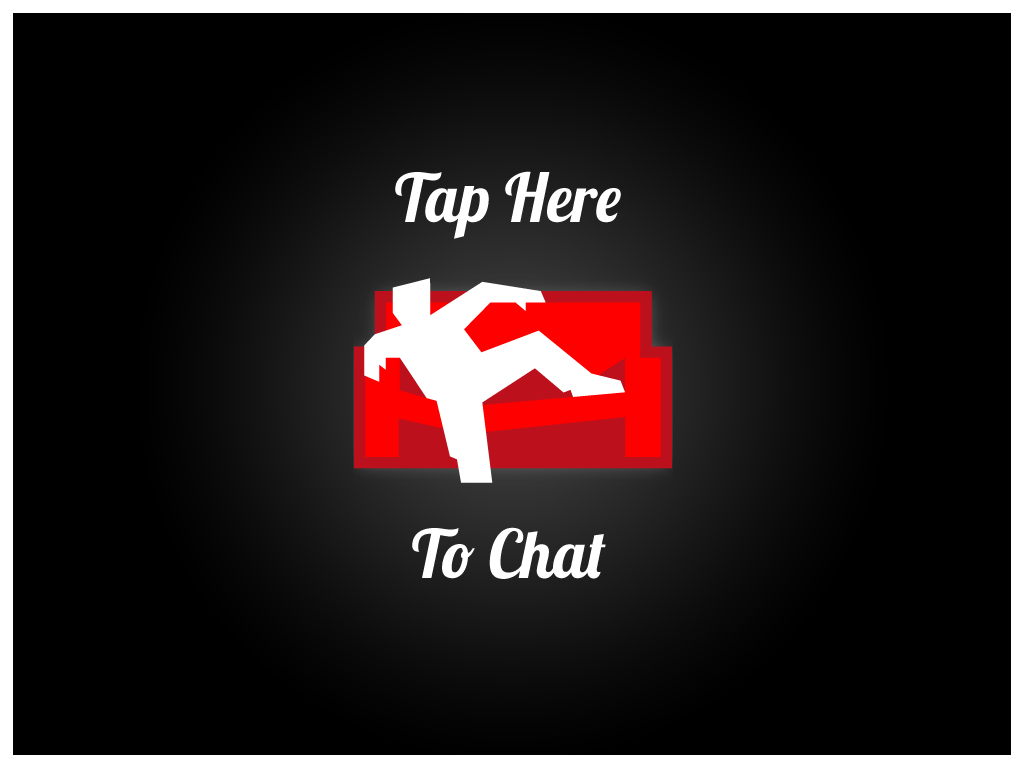
<style>
.page{position:relative;width:1024px;height:768px;background:#000000}
.page>*{position:absolute;margin:0}
.t1{font:66.9px "Lobster1.4";color:#ffffff;scale:0.97 1}
</style>
<div class="page">
<p class="t1" style="left:395px;top:171px;width:226px;height:68px">Tap Here</p>
<p class="t1" style="left:412px;top:527px;width:194px;height:52px">To Chat</p>
</div>
